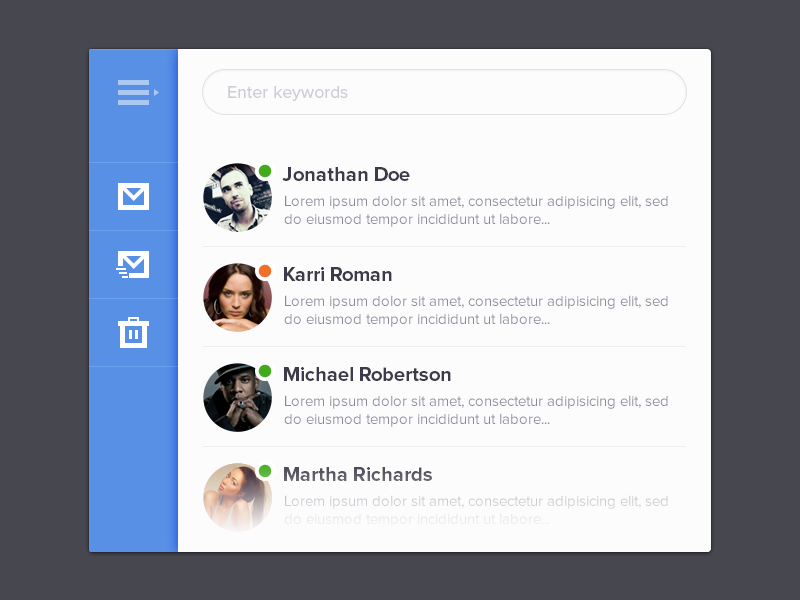
<style>
.page{position:relative;width:800px;height:600px;background:#fcfcfc}
.page>*{position:absolute;margin:0}
.t1{font:18px "ProximaNova-Regular";color:#cecdd7}
.t2{font:20px "ProximaNova-Bold";color:#3d3b49}
.t3{font:15px "ProximaNova-Regular";color:#8b889a}
.t4{font:20px "ProximaNova-Bold";color:#5e5c68}
.t5{font:15px "ProximaNova-Regular"}
</style>
<div class="page">
<p class="t1" style="left:228px;top:85px;width:120px;height:16px">Enter keywords</p>
<p class="t2" style="left:282px;top:167px;width:128px;height:14px">Jonathan Doe</p>
<p class="t3" style="left:284px;top:195px;width:384px;height:32px">Lorem ipsum dolor sit amet, consectetur adipisicing elit, sed do eiusmod tempor incididunt ut labore...</p>
<p class="t2" style="left:284px;top:267px;width:108px;height:14px">Karri Roman</p>
<p class="t3" style="left:284px;top:295px;width:384px;height:32px">Lorem ipsum dolor sit amet, consectetur adipisicing elit, sed do eiusmod tempor incididunt ut labore...</p>
<p class="t2" style="left:284px;top:367px;width:167px;height:14px">Michael Robertson</p>
<p class="t3" style="left:284px;top:395px;width:384px;height:32px">Lorem ipsum dolor sit amet, consectetur adipisicing elit, sed do eiusmod tempor incididunt ut labore...</p>
<p class="t4" style="left:284px;top:467px;width:148px;height:14px">Martha Richards</p>
<p class="t5" style="left:284px;top:495px;width:384px;height:32px">Lorem ipsum dolor sit amet, consectetur adipisicing elit, sed do eiusmod tempor incididunt ut labore...</p>
</div>
